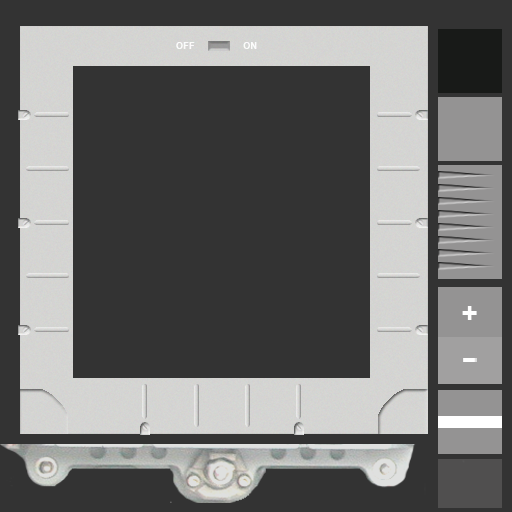
<style>
.page{position:relative;width:512px;height:512px;background:#333333}
.page>*{position:absolute;margin:0}
.t1{font:9.4px "Arial-BoldMT";color:#ffffff}
.t2{font:27.9px "Arial-BoldMT";color:#ffffff}
</style>
<div class="page">
<p class="t1" style="left:176px;top:42px;width:19px;height:7px">OFF</p>
<p class="t1" style="left:243px;top:42px;width:14px;height:7px">ON</p>
<p class="t2" style="left:462px;top:306px;width:15px;height:14px">+</p>
</div>
